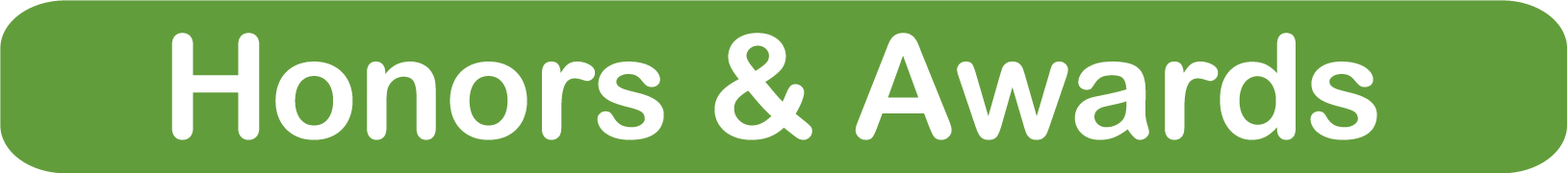
<style>
.page{position:relative;width:1568px;height:173px;background:#629d3b}
.page>*{position:absolute;margin:0}
.t1{font:144.4px "ArialRoundedMTBold";color:#ffffff}
</style>
<div class="page">
<p class="t1" style="left:171px;top:33px;width:1206px;height:108px">Honors &amp; Awards</p>
</div>
